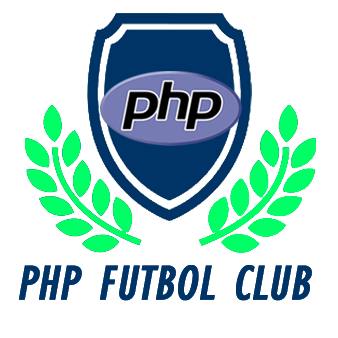
<style>
.page{position:relative;width:338px;height:338px;background:#ffffff}
.page>*{position:absolute;margin:0}
.t1{font:50px "GillSansMT-Condensed";color:#003366;font-weight:bold;font-style:italic}
</style>
<div class="page">
<p class="t1" style="left:19px;top:265px;width:293px;height:36px">PHP FUTBOL CLUB</p>
</div>
